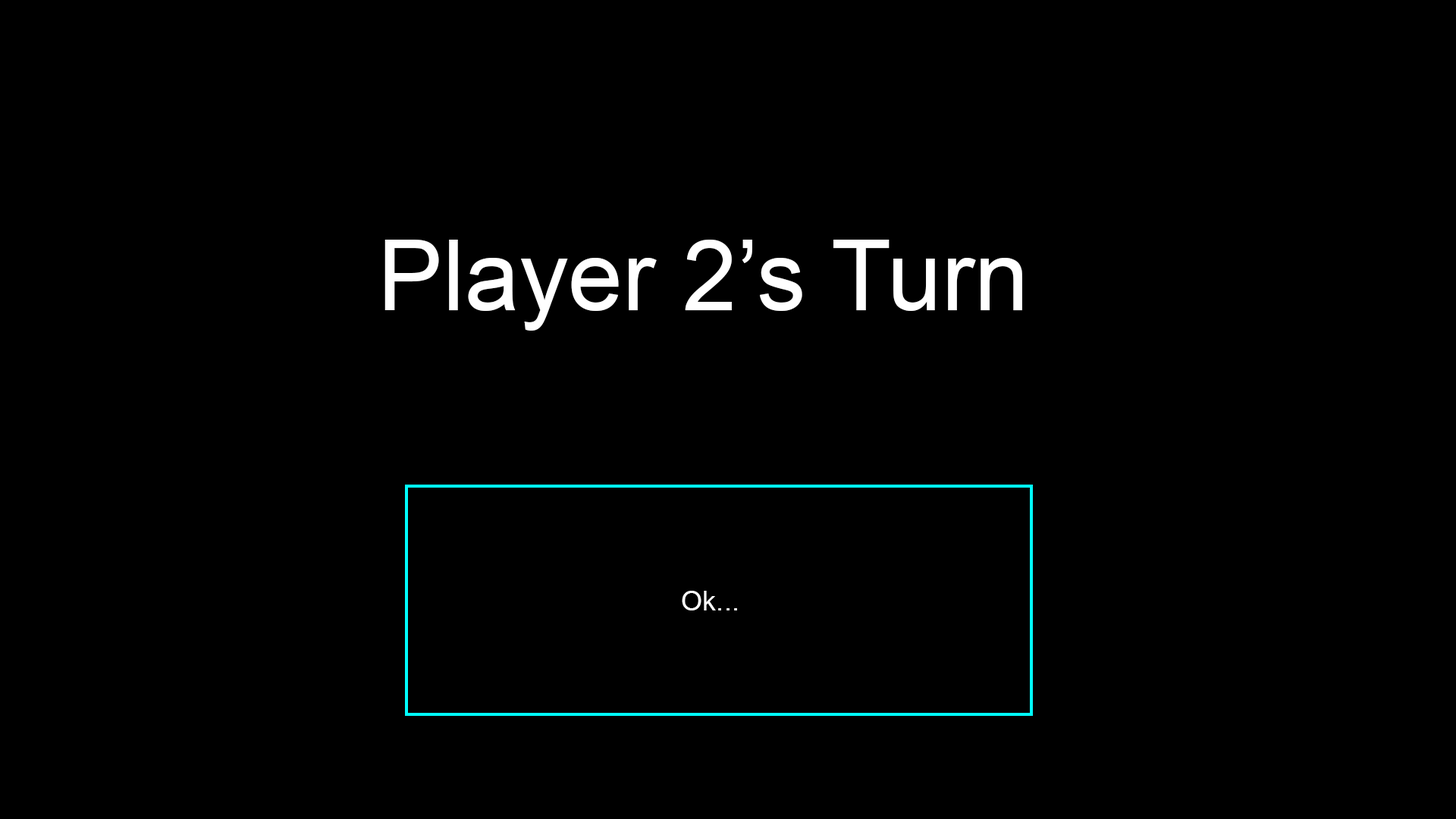
<style>
.page{position:relative;width:1456px;height:819px;background:#000000}
.page>*{position:absolute;margin:0}
.t1{font:97.9px "ArialMT";color:#ffffff}
.t2{font:27.3px "ArialMT";color:#ffffff}
</style>
<div class="page">
<p class="t1" style="left:384px;top:240px;width:638px;height:91px">Player 2’s Turn</p>
<p class="t2" style="left:682px;top:591px;width:55px;height:19px">Ok...</p>
</div>
